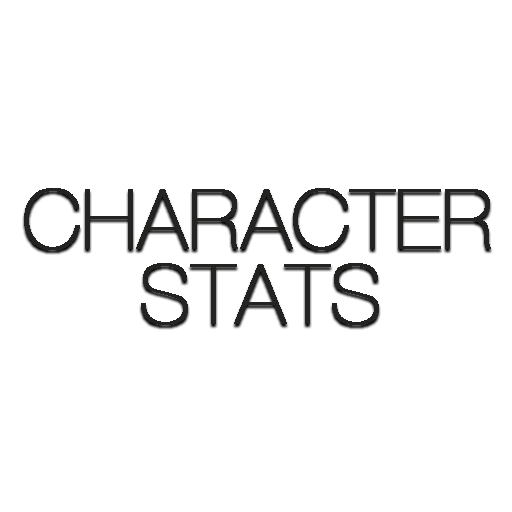
<style>
.page{position:relative;width:512px;height:512px;background:#ffffff}
.page>*{position:absolute;margin:0}
.t1{font:83.3px "HelveticaNeue-Regular";color:#232322;font-weight:bold}
</style>
<div class="page">
<p class="t1" style="left:24px;top:188px;width:467px;height:62px">CHARACTER</p>
<p class="t1" style="left:141px;top:263px;width:238px;height:62px">STATS</p>
</div>
